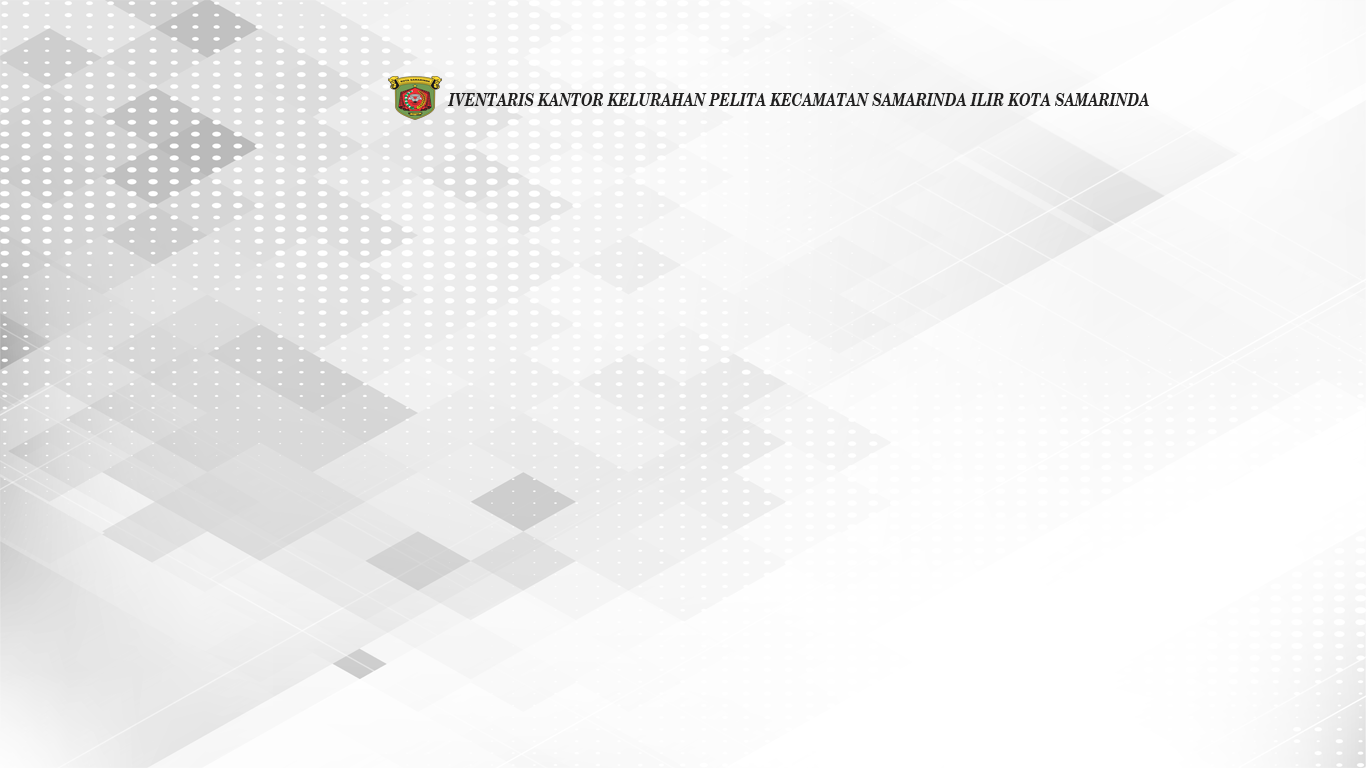
<style>
.page{position:relative;width:1366px;height:768px}
.page>*{position:absolute;margin:0}
.t1{font:18px "CenturySchlbkCyrillicBT-BoldIt";color:#212020;scale:0.77 1}
</style>
<div class="page">
<p class="t1" style="left:447px;top:93px;width:702px;height:13px">IVENTARIS KANTOR KELURAHAN PELITA KECAMATAN SAMARINDA ILIR KOTA SAMARINDA</p>
</div>
